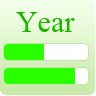
<style>
.page{position:relative;width:96px;height:96px}
.page>*{position:absolute;margin:0}
.t1{font:30px "TimesNewRomanPSMT";color:#1eb500}
</style>
<div class="page">
<p class="t1" style="left:16px;top:12px;width:59px;height:20px">Year</p>
</div>
